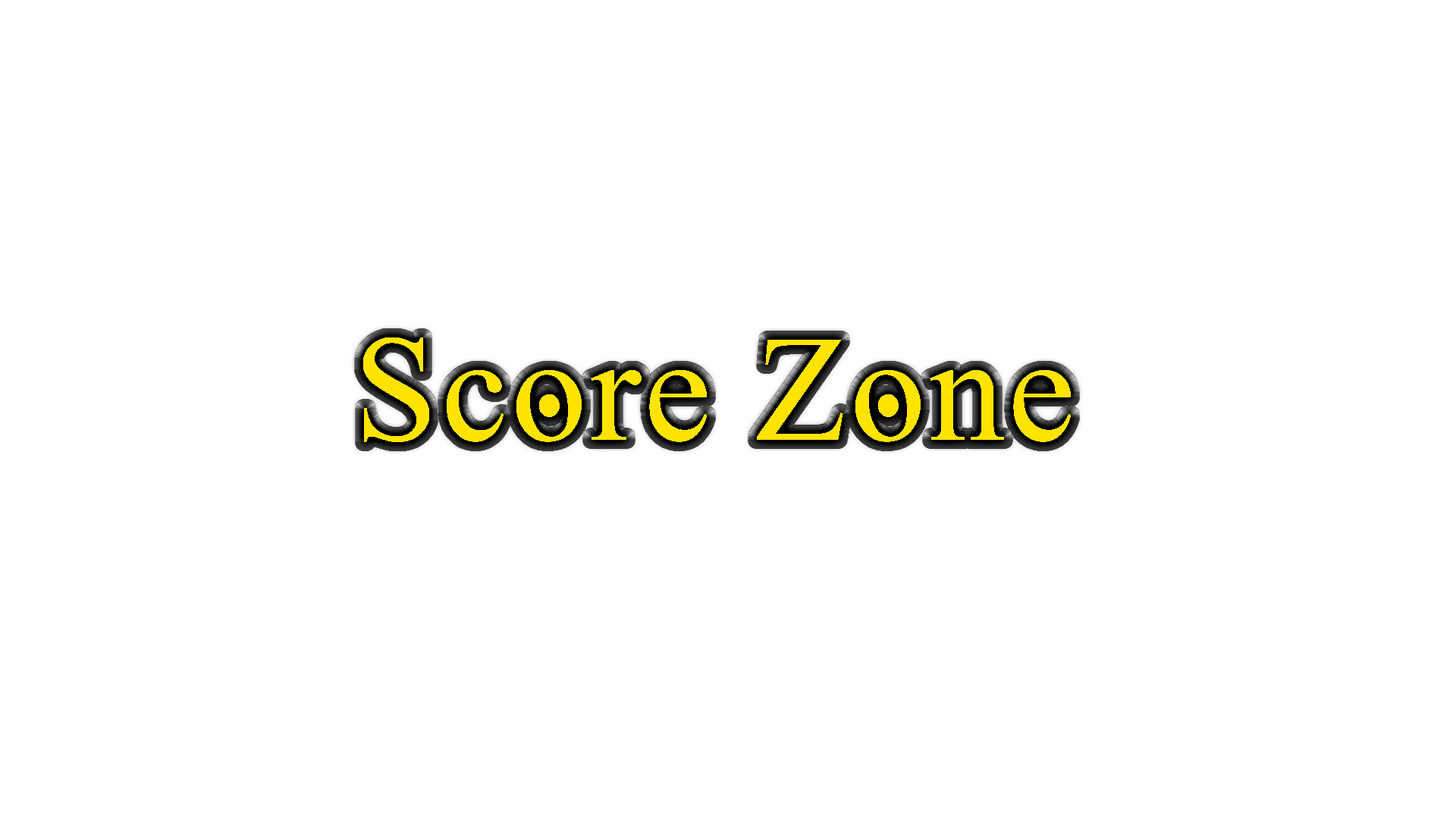
<style>
.page{position:relative;width:1456px;height:819px;background:#ffffff}
.page>*{position:absolute;margin:0}
.t1{font:151.7px "GhostTheory";letter-spacing:0.02em;color:#fee300}
</style>
<div class="page">
<p class="t1" style="left:363px;top:337px;width:708px;height:105px">Score Zone</p>
</div>
